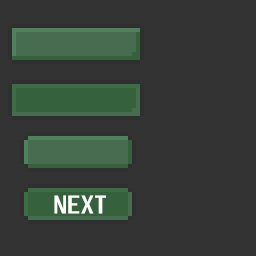
<style>
.page{position:relative;width:256px;height:256px;background:#333333}
.page>*{position:absolute;margin:0}
.t1{font:22px "Unispace-Bold";color:#ffffff}
</style>
<div class="page">
<p class="t1" style="left:54px;top:195px;width:52px;height:19px">NEXT</p>
</div>
